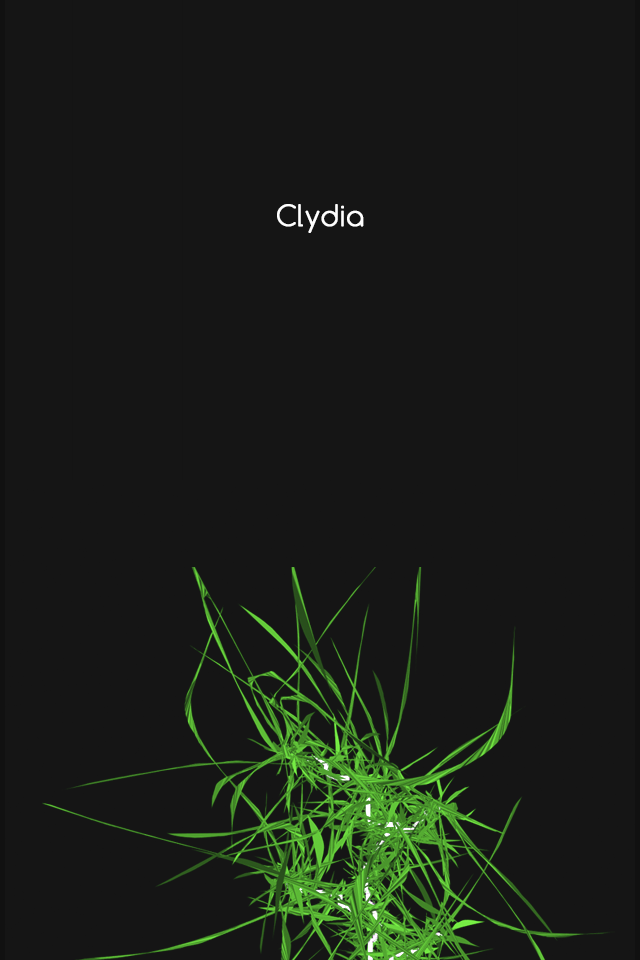
<style>
.page{position:relative;width:640px;height:960px;background:#151515}
.page>*{position:absolute;margin:0}
.t1{font:28px "Comfortaa-Light";color:#ffffff;font-weight:bold}
</style>
<div class="page">
<p class="t1" style="left:277px;top:204px;width:87px;height:29px">Clydia</p>
</div>
